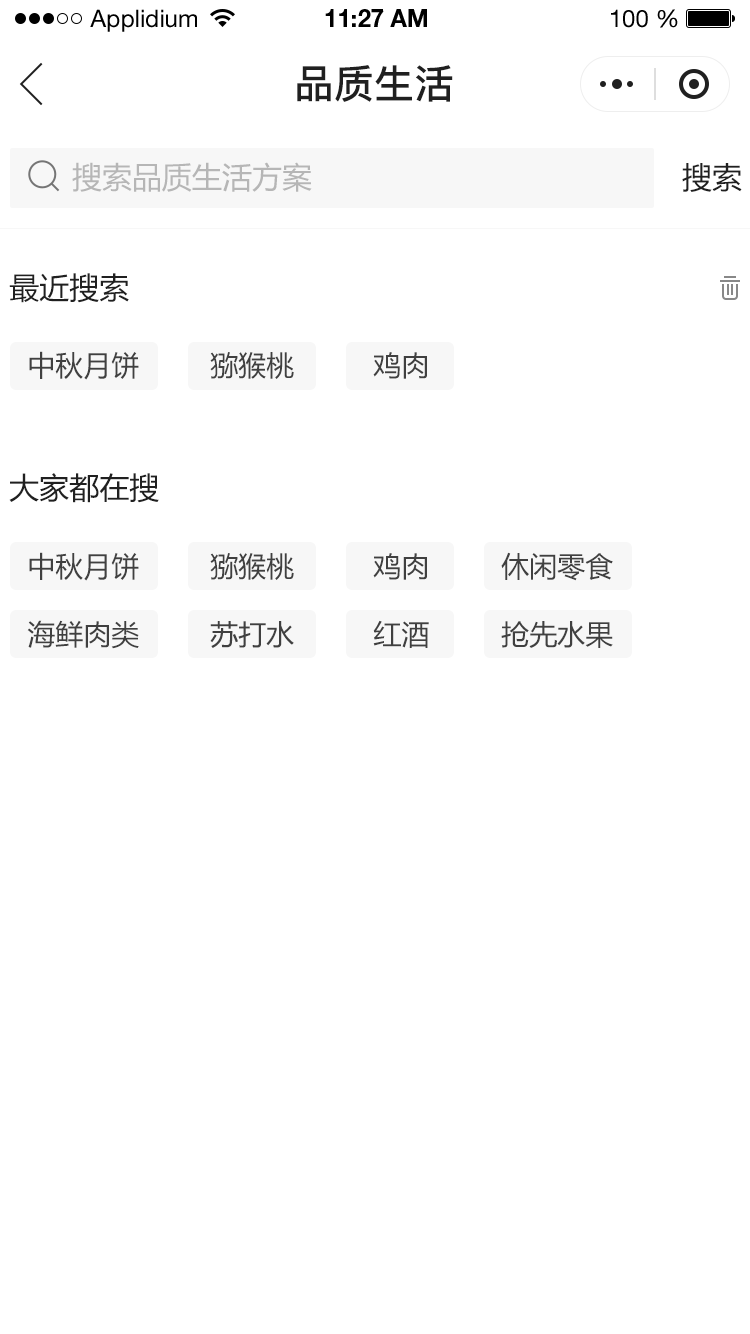
<style>
.page{position:relative;width:750px;height:1334px;background:#ffffff}
.page>*{position:absolute;margin:0}
.t1{font:24px "HelveticaNeueLTStd-Roman";color:#000000}
.t2{font:24px "HelveticaNeueLTStd-Bd";color:#000000}
.t3{font:40px "PingFang-SC-Bold";color:#202020;text-transform:uppercase}
.t4{font:30px "MicrosoftYaHei";color:#b6b6b6;text-transform:uppercase}
.t5{font:30px "MicrosoftYaHei";color:#202020;text-transform:uppercase}
.t6{font:28px "MicrosoftYaHei";color:#404040;text-transform:uppercase}
</style>
<div class="page">
<p class="t1" style="left:90px;top:9px;width:107px;height:23px">Applidium</p>
<p class="t2" style="left:325px;top:9px;width:102px;height:18px">11:27 AM</p>
<p class="t1" style="left:611px;top:9px;width:67px;height:19px">100 %</p>
<p class="t3" style="left:297px;top:65px;width:156px;height:37px">品质生活</p>
<p class="t4" style="left:72px;top:162px;width:240px;height:30px">搜索品质生活方案</p>
<p class="t5" style="left:682px;top:163px;width:60px;height:29px">搜索</p>
<p class="t5" style="left:9px;top:273px;width:120px;height:30px">最近搜索</p>
<p class="t6" style="left:29px;top:351px;width:110px;height:29px">中秋月饼</p>
<p class="t6" style="left:210px;top:352px;width:84px;height:27px">猕猴桃</p>
<p class="t6" style="left:373px;top:352px;width:54px;height:27px">鸡肉</p>
<p class="t5" style="left:9px;top:473px;width:150px;height:30px">大家都在搜</p>
<p class="t6" style="left:29px;top:552px;width:110px;height:29px">中秋月饼</p>
<p class="t6" style="left:210px;top:553px;width:84px;height:27px">猕猴桃</p>
<p class="t6" style="left:373px;top:553px;width:54px;height:27px">鸡肉</p>
<p class="t6" style="left:501px;top:552px;width:112px;height:29px">休闲零食</p>
<p class="t6" style="left:27px;top:620px;width:112px;height:29px">海鲜肉类</p>
<p class="t6" style="left:210px;top:621px;width:84px;height:27px">苏打水</p>
<p class="t6" style="left:373px;top:620px;width:56px;height:28px">红酒</p>
<p class="t6" style="left:501px;top:621px;width:112px;height:27px">抢先水果</p>
</div>
